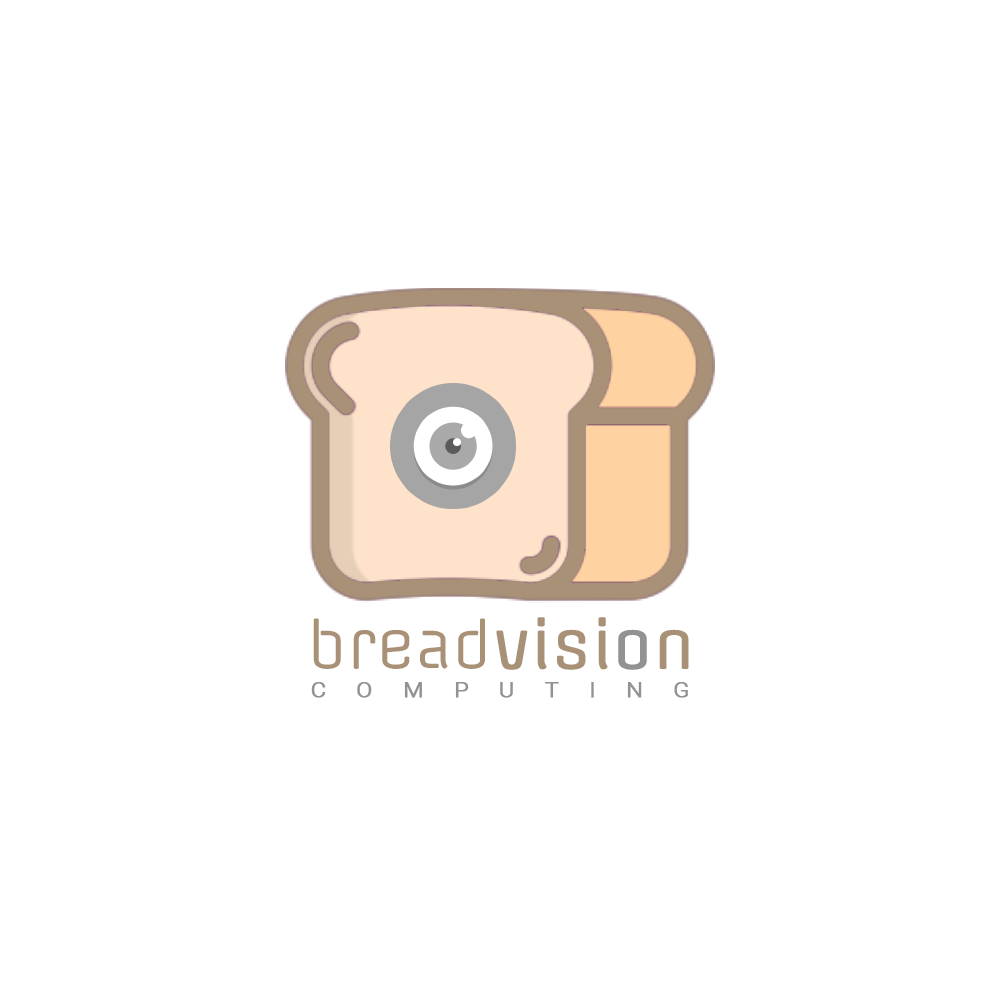
<style>
.page{position:relative;width:1000px;height:1000px;background:#ffffff}
.page>*{position:absolute;margin:0}
.t1{font:61.9px "Offside-Regular";color:#a89177}
.t2{font:61.9px "Offside-Regular";color:#a89177;font-weight:bold}
.t3{font:61.9px "Offside-Regular";color:#929292;font-weight:bold}
.t4{font:27.1px "Roboto-Light";letter-spacing:1.1em;color:#929292;font-variant:small-caps;font-weight:bold}
</style>
<div class="page">
<p class="t1" style="left:313px;top:617px;width:376px;height:53px">bread<span class="t2">visi</span><span class="t3">o</span><span class="t2">n</span></p>
<p class="t4" style="left:311px;top:682px;width:377px;height:16px">computing</p>
</div>
